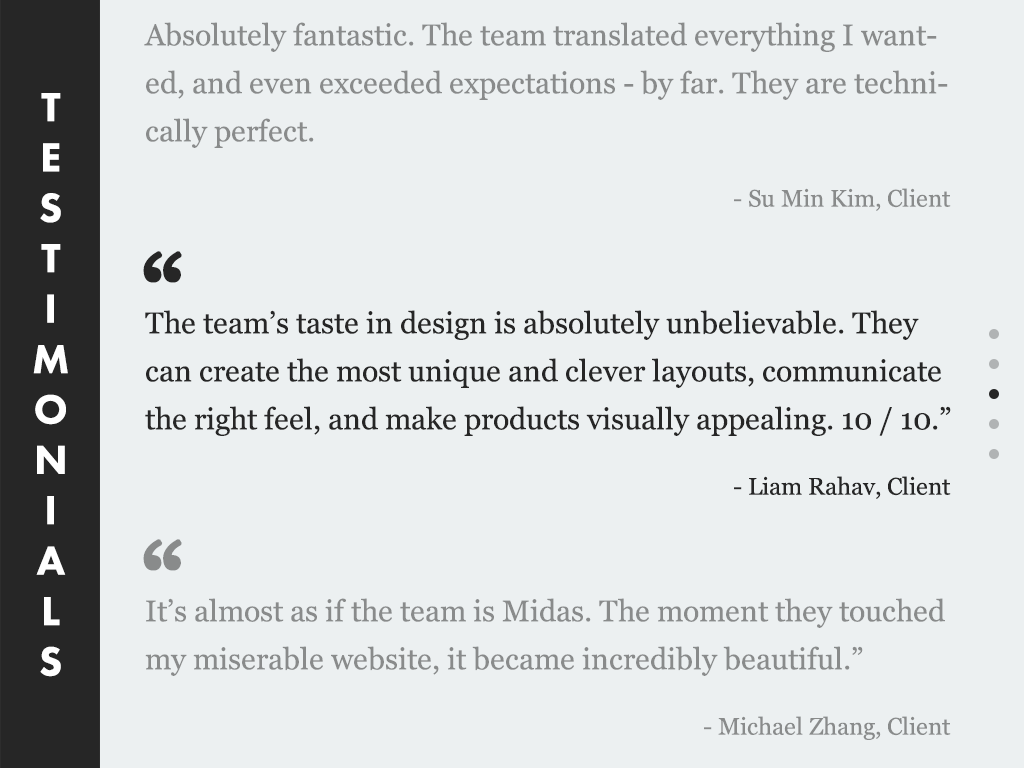
<style>
.page{position:relative;width:1024px;height:768px;background:#ecf0f1}
.page>*{position:absolute;margin:0}
.t1{font:30px/48px "Georgia";color:#898b8b}
.t2{font:42px "FuturaPT-Heavy";color:#ffffff}
.t3{font:24px "Georgia";color:#898b8b}
.t4{font:108px "Georgia";color:#262626;font-weight:bold}
.t5{font:30px/48px "Georgia";color:#262626}
.t6{font:24px "Georgia";color:#262626}
.t7{font:108px "Georgia";color:#898b8b;font-weight:bold}
</style>
<div class="page">
<p class="t1" style="left:144px;top:22px;width:804px;height:126px">Absolutely fantastic. The team translated everything I want-<br>ed, and even exceeded expectations - by far. They are techni-<br>cally perfect.</p>
<p class="t2" style="left:33px;top:93px;width:35px;height:584px;text-align:center">T<br>E<br>S<br>T<br>I<br>M<br>O<br>N<br>I<br>A<br>L<br>S</p>
<p class="t3" style="left:734px;top:188px;width:217px;height:23px">- Su Min Kim, Client</p>
<p class="t4" style="left:143px;top:251px;width:39px;height:32px">“</p>
<p class="t5" style="left:145px;top:310px;width:806px;height:126px">The team’s taste in design is absolutely unbelievable. They<br>can create the most unique and clever layouts, communicate<br>the right feel, and make products visually appealing. 10 / 10.”</p>
<p class="t6" style="left:734px;top:476px;width:217px;height:23px">- Liam Rahav, Client</p>
<p class="t7" style="left:143px;top:539px;width:39px;height:32px">“</p>
<p class="t1" style="left:145px;top:598px;width:800px;height:78px">It’s almost as if the team is Midas. The moment they touched<br>my miserable website, it became incredibly beautiful.”</p>
<p class="t3" style="left:704px;top:716px;width:247px;height:24px">- Michael Zhang, Client</p>
</div>
